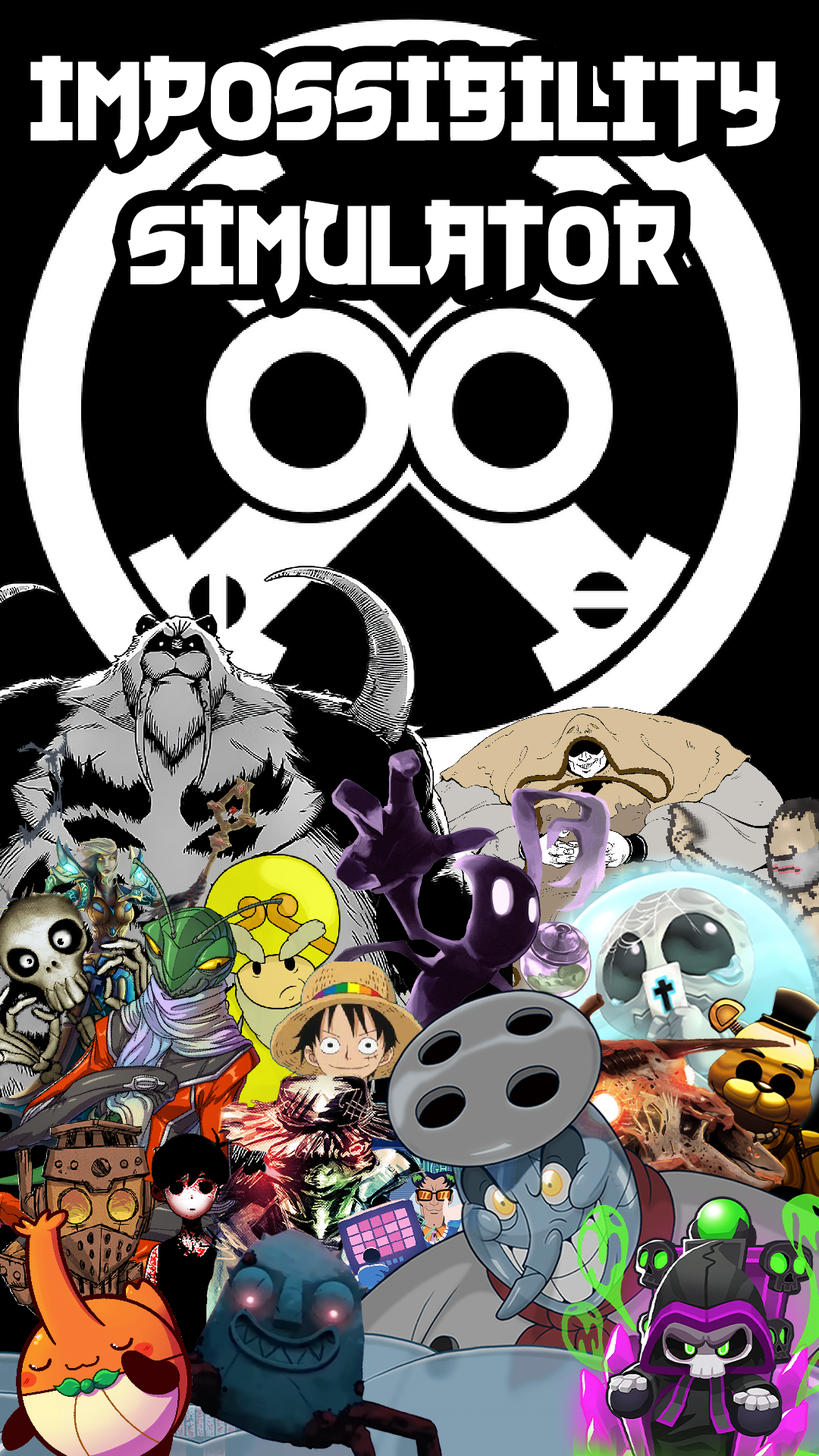
<style>
.page{position:relative;width:819px;height:1456px;background:#000000}
.page>*{position:absolute;margin:0}
.t1{font:123.2px/144.1px "NukuNuku";color:#ffffff}
</style>
<div class="page">
<p class="t1" style="left:30px;top:55px;width:750px;height:248px;text-align:center">Impossibility <br>Simulator</p>
</div>
